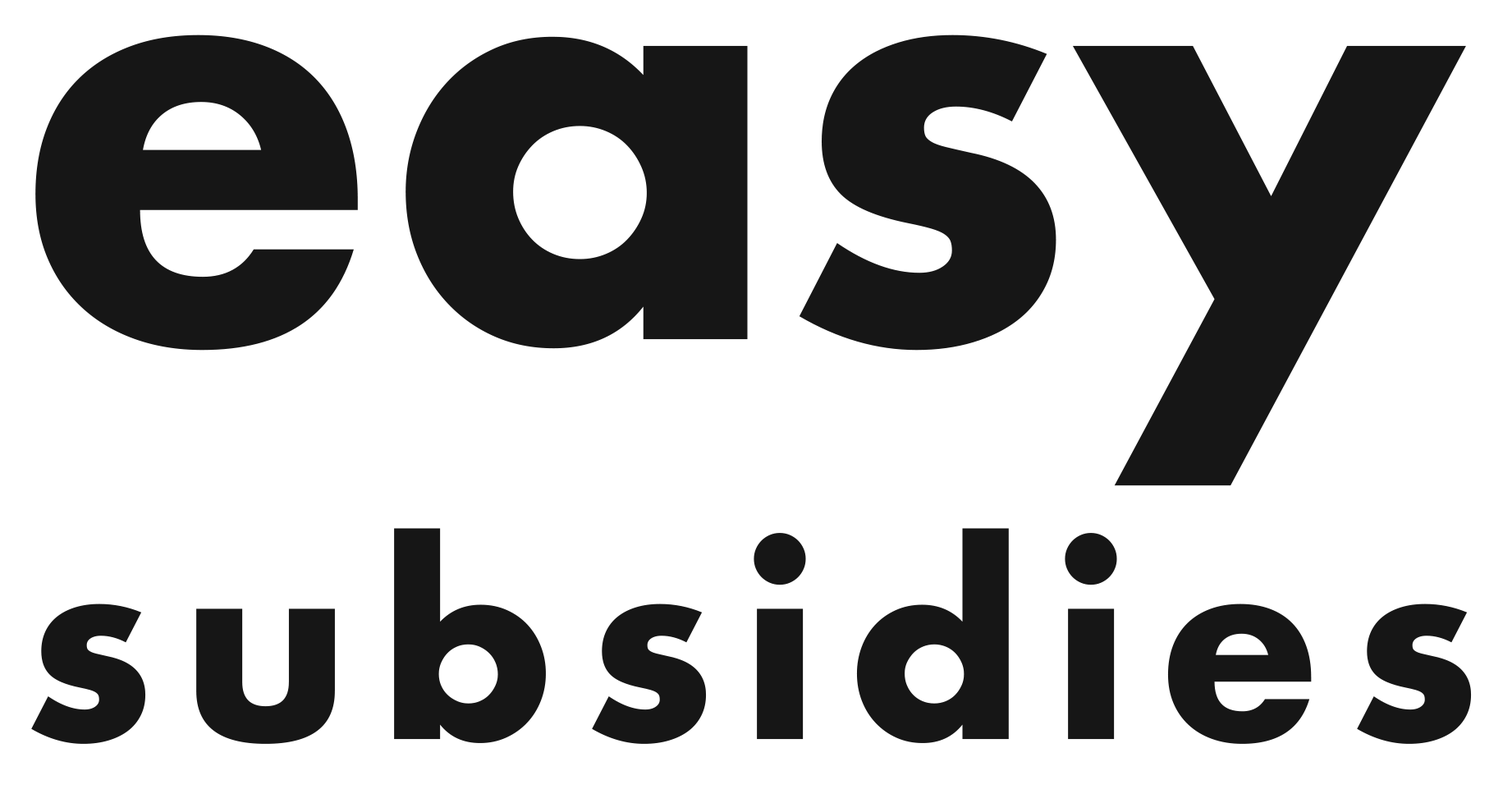
<style>
.page{position:relative;width:1503px;height:794px;background:#ffffff}
.page>*{position:absolute;margin:0}
.t1{font:571.4px "Futura-Bold";color:#161616}
.t2{font:253.7px "Futura-Bold";letter-spacing:0.11em;color:#161616}
</style>
<div class="page">
<p class="t1" style="left:35px;top:34px;width:1431px;height:452px">easy</p>
<p class="t2" style="left:31px;top:528px;width:1440px;height:216px">subsidies</p>
</div>
